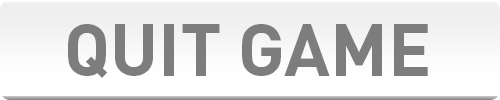
<style>
.page{position:relative;width:500px;height:100px;background:#ffffff}
.page>*{position:absolute;margin:0}
.t1{font:72px "DINPro-Bold";color:#7d7d7d}
</style>
<div class="page">
<p class="t1" style="left:68px;top:24px;width:360px;height:54px">QUIT GAME</p>
</div>
